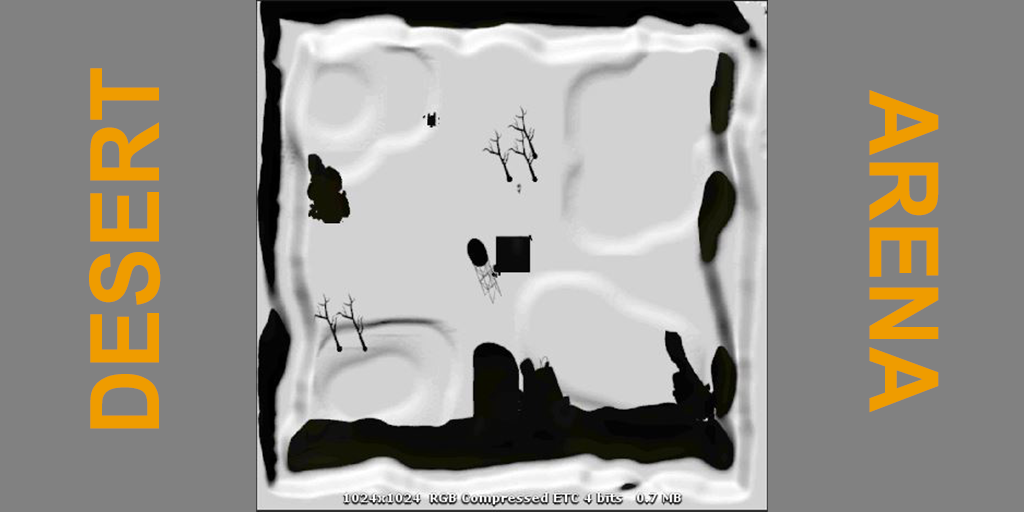
<style>
.page{position:relative;width:1024px;height:512px;background:#818181}
.page>*{position:absolute;margin:0}
.t1{font:96px "Arial-BoldMT";color:#ef9c00;scale:0.95 1}
.t2{font:96px "Arial-BoldMT";color:#ef9c00;scale:0.94 1}
</style>
<div class="page">
<p class="t1" style="left:89px;top:68px;width:72px;height:361px;rotate:-90deg">DESERT</p>
<p class="t2" style="left:869px;top:90px;width:70px;height:323px;rotate:90deg">ARENA</p>
</div>
